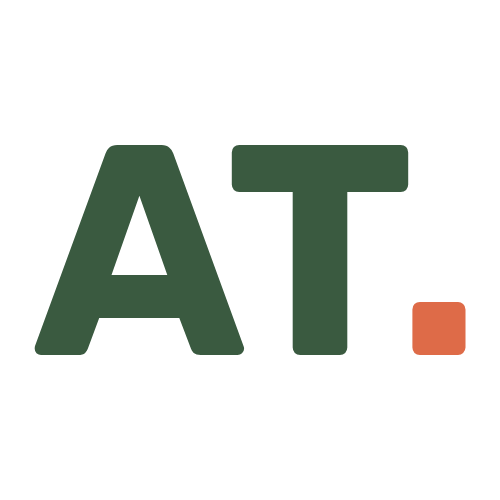
<style>
.page{position:relative;width:500px;height:500px;background:#ffffff}
.page>*{position:absolute;margin:0}
.t1{font:300px "Rubik-Bold";color:#3a5a40}
.t2{font:300px "Rubik-Bold";color:#de6b48}
</style>
<div class="page">
<p class="t1" style="left:34px;top:145px;width:432px;height:210px">AT<span class="t2">.</span></p>
</div>
